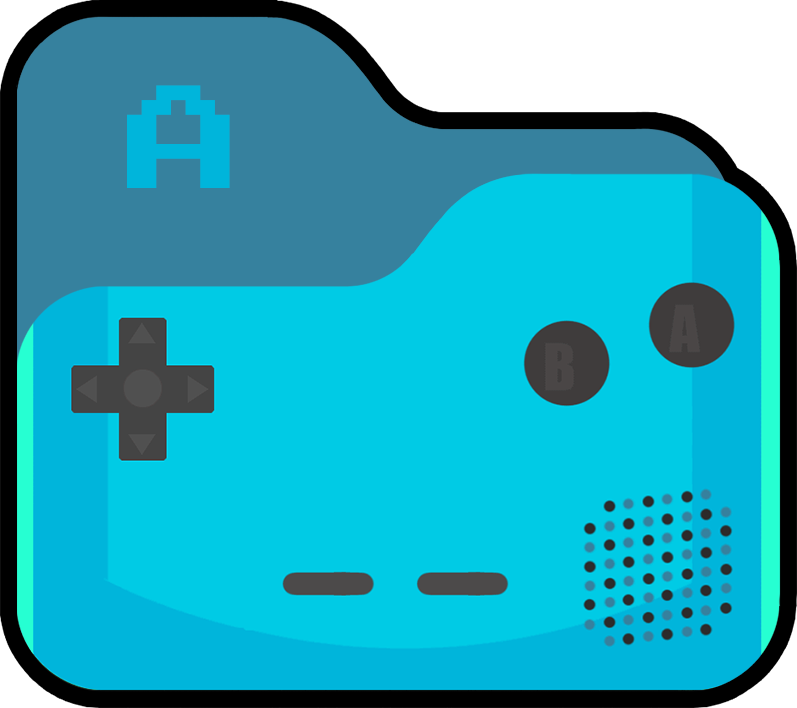
<style>
.page{position:relative;width:797px;height:708px;background:#00cbe5}
.page>*{position:absolute;margin:0}
.t1{font:150px "PixelEmulator";color:#00b5db}
</style>
<div class="page">
<p class="t1" style="left:127px;top:85px;width:103px;height:103px">A</p>
</div>
